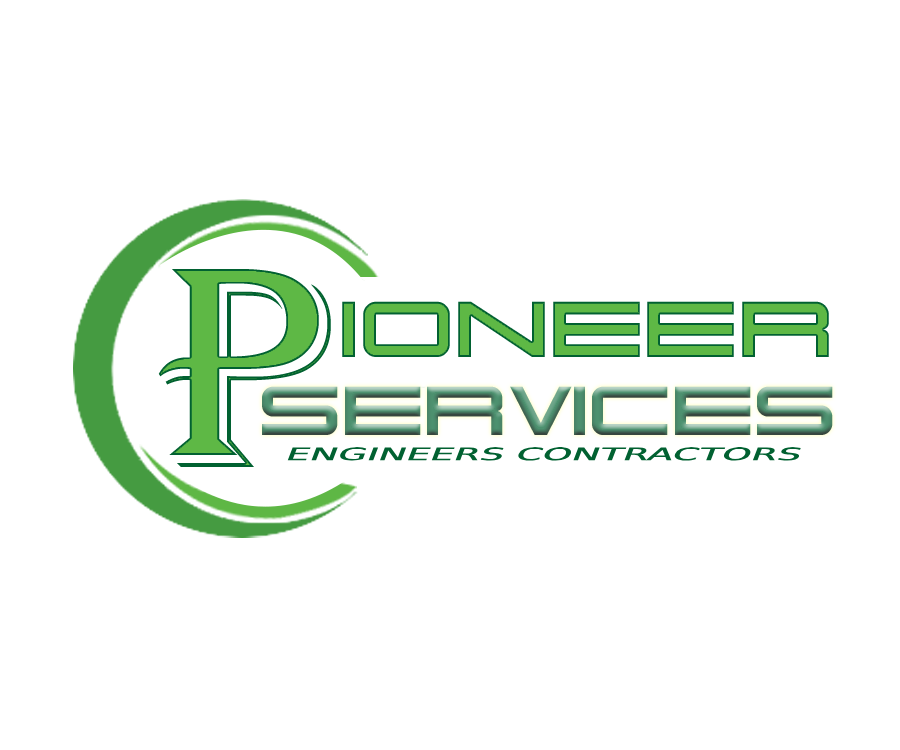
<style>
.page{position:relative;width:900px;height:750px;background:#ffffff}
.page>*{position:absolute;margin:0}
.t1{font:297.3px "Algerian";color:#5eb845;text-transform:uppercase}
.t2{font:79px "Otomo-Regular";color:#5eb845;text-transform:uppercase}
.t3{font:29.8px "Otomo-Regular";color:#016131;text-transform:uppercase;font-weight:bold;font-style:italic;scale:2.11 1}
</style>
<div class="page">
<p class="t1" style="left:158px;top:269px;width:173px;height:198px">p</p>
<p class="t2" style="left:342px;top:301px;width:487px;height:56px">ioneer</p>
<p class="t3" style="left:287px;top:447px;width:514px;height:14px">Engineers Contractors</p>
</div>
